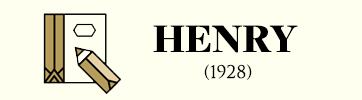
<style>
.page{position:relative;width:362px;height:100px;background:#fffff0}
.page>*{position:absolute;margin:0}
.t1{font:42px "FreightDispProBlack-Regular";color:#000000}
.t2{font:17px "TrajanPro3-Regular";color:#000000}
</style>
<div class="page">
<p class="t1" style="left:153px;top:25px;width:145px;height:28px">HENRY</p>
<p class="t2" style="left:204px;top:64px;width:48px;height:16px">(1928)</p>
</div>
